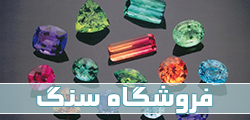
<style>
.page{position:relative;width:250px;height:120px}
.page>*{position:absolute;margin:0}
.t1{font:30px "BSultanKoufi";color:#ffffff}
</style>
<div class="page">
<p class="t1" style="left:37px;top:85px;width:176px;height:29px">فروشگاه سنگ</p>
</div>
